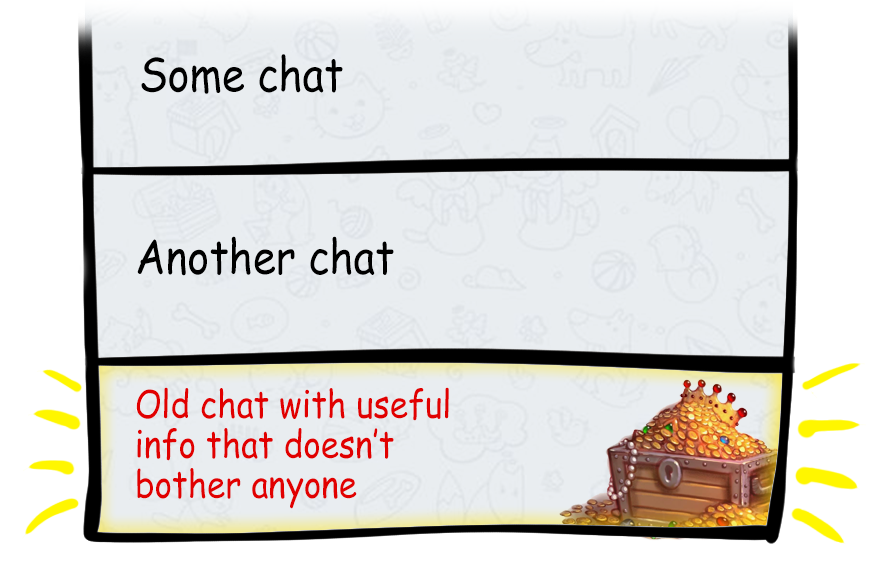
<style>
.page{position:relative;width:871px;height:566px;background:#e9edf0}
.page>*{position:absolute;margin:0}
.t1{font:47.1px "ComicSansMS";color:#000000;scale:0.88 1}
.t2{font:37.7px "ComicSansMS";color:#e10000;scale:0.88 1}
</style>
<div class="page">
<p class="t1" style="left:141px;top:54px;width:202px;height:40px">Some chat</p>
<p class="t1" style="left:137px;top:236px;width:257px;height:40px">Another chat</p>
<p class="t2" style="left:136px;top:387px;width:313px;height:122px">Old chat with useful info that doesn’t bother anyone</p>
</div>
